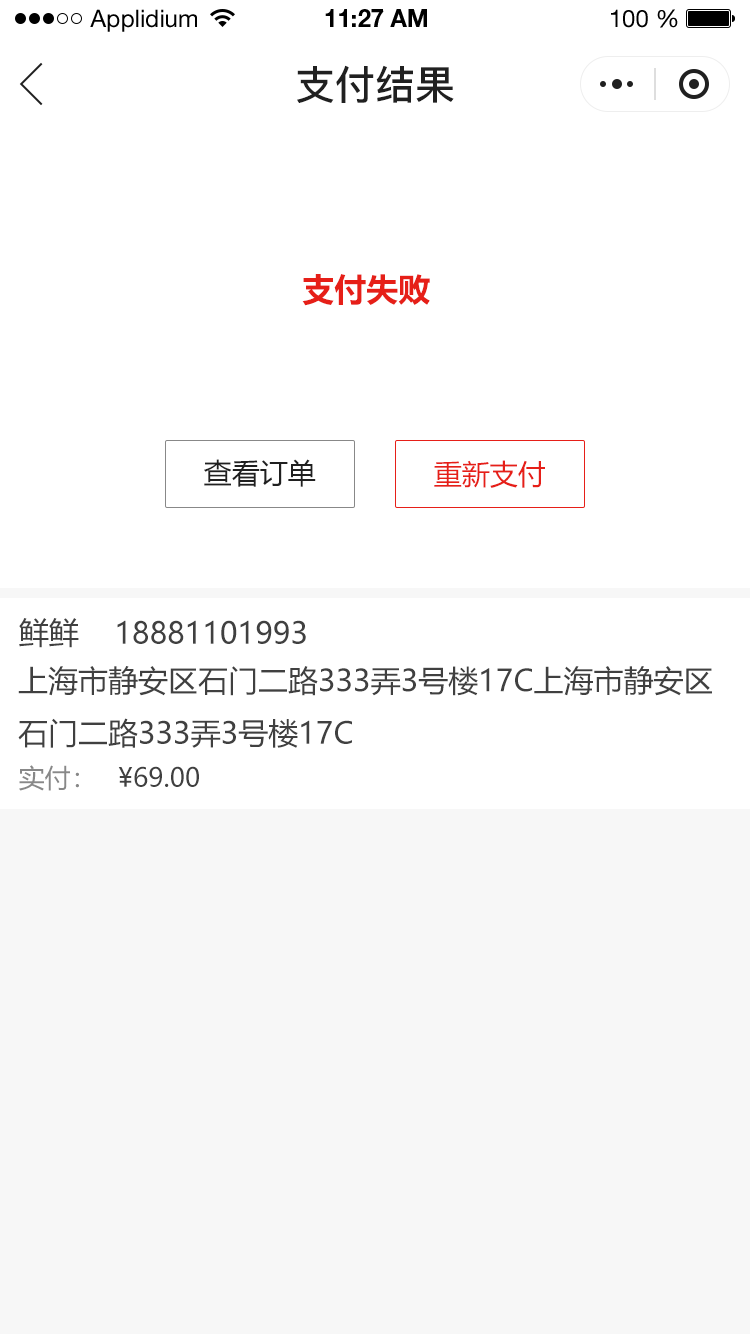
<style>
.page{position:relative;width:750px;height:1334px;background:#ffffff}
.page>*{position:absolute;margin:0}
.t1{font:24px "HelveticaNeueLTStd-Roman";color:#000000}
.t2{font:24px "HelveticaNeueLTStd-Bd";color:#000000}
.t3{font:40px "PingFang-SC-Bold";color:#202020;text-transform:uppercase}
.t4{font:32px "MicrosoftYaHei-Bold";color:#e61f18;text-transform:uppercase}
.t5{font:28px "MicrosoftYaHei";color:#202020;text-transform:uppercase}
.t6{font:28px "MicrosoftYaHei";color:#e61f18;text-transform:uppercase}
.t7{font:30px "MicrosoftYaHei";color:#404040;text-transform:uppercase}
.t8{font:26px "MicrosoftYaHei";color:#888888;text-transform:uppercase}
.t9{font:26px "MicrosoftYaHei";color:#404040;text-transform:uppercase}
</style>
<div class="page">
<p class="t1" style="left:90px;top:9px;width:107px;height:23px">Applidium</p>
<p class="t2" style="left:325px;top:9px;width:102px;height:18px">11:27 AM</p>
<p class="t1" style="left:611px;top:9px;width:67px;height:19px">100 %</p>
<p class="t3" style="left:297px;top:65px;width:157px;height:38px">支付结果</p>
<p class="t4" style="left:302px;top:274px;width:128px;height:32px">支付失败</p>
<p class="t5" style="left:204px;top:459px;width:112px;height:28px">查看订单</p>
<p class="t6" style="left:434px;top:460px;width:111px;height:28px">重新支付</p>
<p class="t7" style="left:19px;top:618px;width:60px;height:30px">鲜鲜</p>
<p class="t7" style="left:117px;top:620px;width:189px;height:24px">18881101993</p>
<p class="t7" style="left:18px;top:666px;width:694px;height:82px">上海市静安区石门二路333弄3号楼17c上海市静安区<br>石门二路333弄3号楼17c</p>
<p class="t8" style="left:19px;top:765px;width:60px;height:26px">实付：</p>
<p class="t9" style="left:118px;top:766px;width:81px;height:21px">¥69.00</p>
</div>
